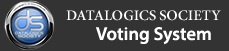
<style>
.page{position:relative;width:229px;height:51px;background:#333333}
.page>*{position:absolute;margin:0}
.t1{font:14.7px "MinionPro-Semibold";color:#ffffff}
.t2{font:18.7px "MyriadPro-Semibold";color:#ffffff}
</style>
<div class="page">
<p class="t1" style="left:66px;top:10px;width:155px;height:11px">DATALOGICS SOCIETY</p>
<p class="t2" style="left:96px;top:27px;width:115px;height:18px">Voting System</p>
</div>
